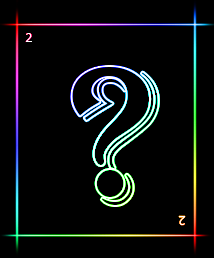
<style>
.page{position:relative;width:214px;height:258px;background:#000000}
.page>*{position:absolute;margin:0}
.t1{font:14px "Consolas";color:#ffffff}
</style>
<div class="page">
<p class="t1" style="left:25px;top:33px;width:7px;height:9px">2</p>
<p class="t1" style="left:178px;top:215px;width:8px;height:11px;rotate:180deg">2</p>
</div>
